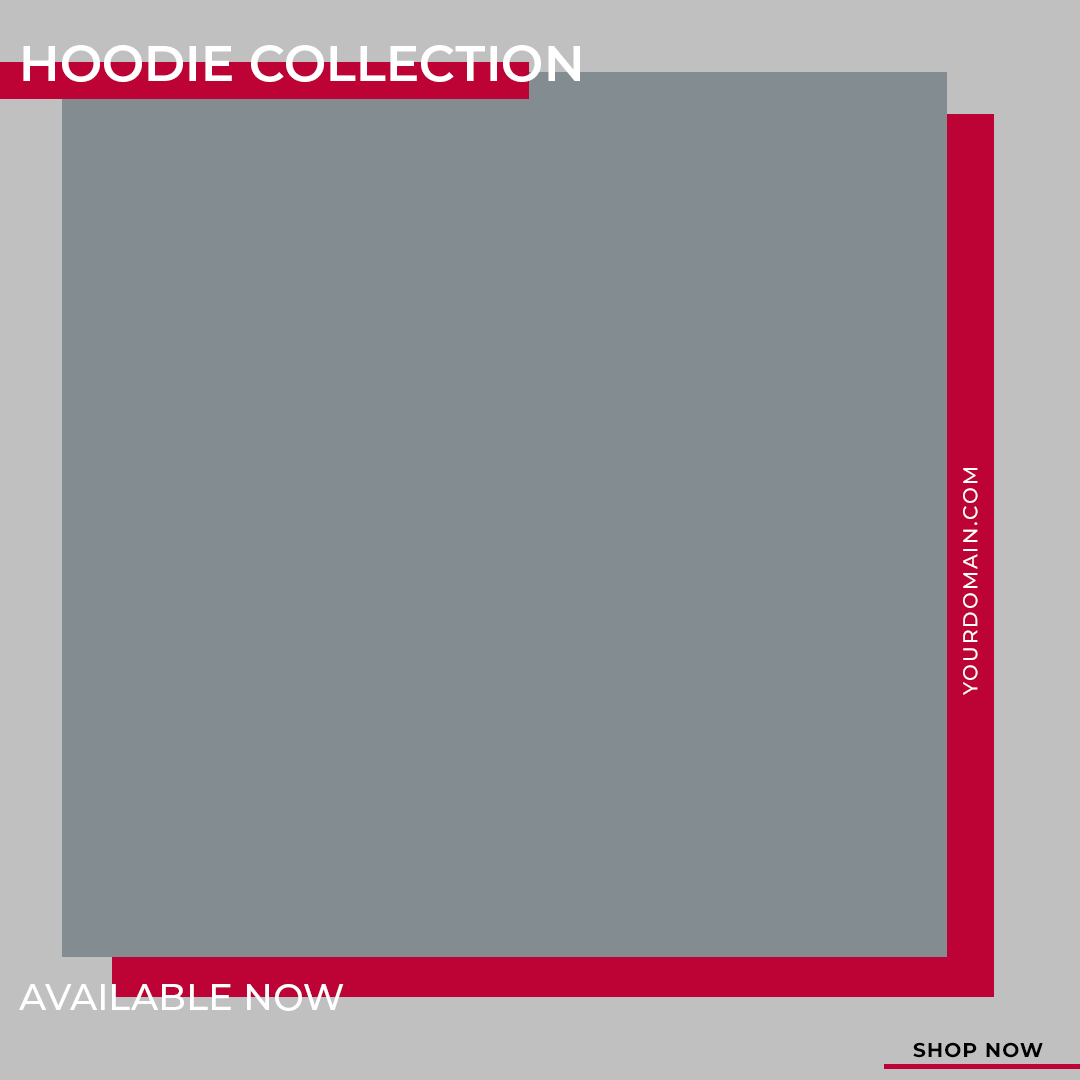
<style>
.page{position:relative;width:1080px;height:1080px;background:#838c91}
.page>*{position:absolute;margin:0}
.t1{font:50px "Montserrat-SemiBold";color:#ffffff;text-transform:uppercase}
.t2{font:20px "Montserrat-Medium";letter-spacing:0.1em;color:#ffffff;text-transform:uppercase}
.t3{font:8.9px "Montserrat-Medium";color:#ffffff;text-transform:uppercase}
.t4{font:20.2px "Montserrat-Bold";letter-spacing:0.05em;color:#000000;text-transform:uppercase}
</style>
<div class="page">
<p class="t1" style="left:23px;top:45px;width:557px;height:37px">Hoodie Collection</p>
<p class="t2" style="left:963px;top:468px;width:15px;height:227px;rotate:-90deg">Yourdomain.com</p>
<p class="t3" style="left:19px;top:984px;width:325px;height:27px">available now</p>
<p class="t4" style="left:913px;top:1042px;width:130px;height:16px">Shop Now</p>
</div>
